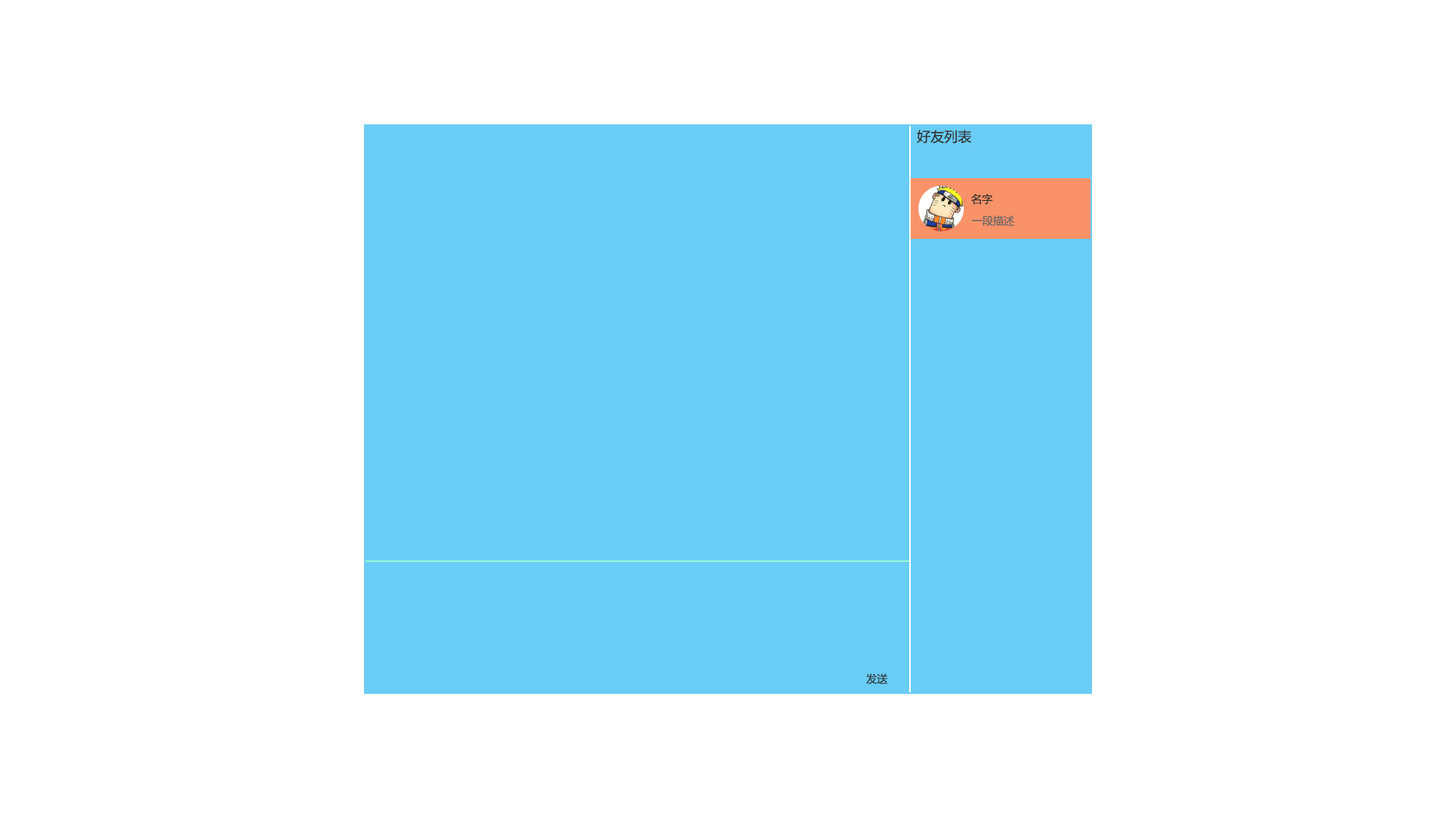
<style>
.page{position:relative;width:1456px;height:819px;background:#ffffff}
.page>*{position:absolute;margin:0}
.t1{font:13.6px "MicrosoftYaHei";color:#333333}
.t2{font:10.6px "MicrosoftYaHei";color:#333333}
.t3{font:10.6px "MicrosoftYaHei";color:#666666}
</style>
<div class="page">
<p class="t1" style="left:917px;top:130px;width:54px;height:13px">好友列表</p>
<p class="t2" style="left:971px;top:193px;width:22px;height:12px">名字</p>
<p class="t3" style="left:971px;top:215px;width:44px;height:11px">一段描述</p>
<p class="t2" style="left:866px;top:673px;width:22px;height:11px">发送</p>
</div>
